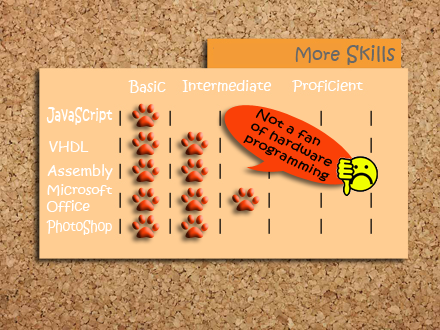
<style>
.page{position:relative;width:440px;height:330px;background:#ffcd92}
.page>*{position:absolute;margin:0}
.t1{font:17px "KristenITC-Regular";color:#686868}
.t2{font:17px "KristenITC-Regular";color:#ffffff;scale:0.73 1}
.t3{font:11.5px "KristenITC-Regular";color:#000000;scale:1.29 1}
.t4{font:15px "ComicSansMS";color:#ffffff}
.t5{font:13px "KristenITC-Regular";color:#ffffff}
.t6{font:15px "KristenITC-Regular";color:#ffffff;scale:0.79 1}
</style>
<div class="page">
<p class="t1" style="left:295px;top:47px;width:45px;height:16px">More</p>
<p class="t2" style="left:46px;top:107px;width:67px;height:18px">JavaScript</p>
<p class="t3" style="left:243px;top:108px;width:89px;height:74px;rotate:26deg">Not a fan <br>of hardware<br>programming</p>
<p class="t4" style="left:49px;top:141px;width:40px;height:11px">VHDL</p>
<p class="t4" style="left:47px;top:164px;width:66px;height:16px">Assembly</p>
<p class="t5" style="left:46px;top:184px;width:67px;height:28px">Microsoft <br>Office</p>
<p class="t6" style="left:46px;top:220px;width:66px;height:15px">PhotoShop</p>
</div>
